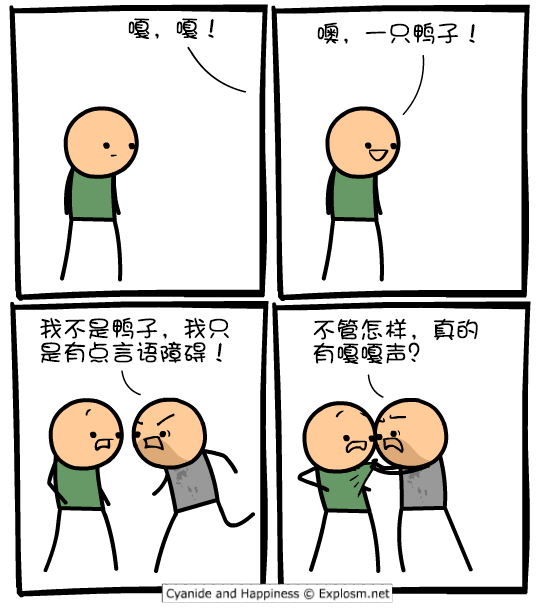
<style>
.page{position:relative;width:540px;height:610px;background:#ffffff}
.page>*{position:absolute;margin:0}
.t1{font:24px "DFPShaoNvW5";color:#000000}
.t2{font:24px/24px "DFPShaoNvW5";color:#000000}
</style>
<div class="page">
<p class="t1" style="left:128px;top:18px;width:86px;height:21px">嘎，嘎！</p>
<p class="t1" style="left:317px;top:22px;width:158px;height:23px">噢，一只鸭子！</p>
<p class="t2" style="left:40px;top:317px;width:189px;height:46px">我不是鸭子，我只<br>是有点言语障碍！</p>
<p class="t2" style="left:313px;top:318px;width:165px;height:46px">不管怎样，真的<br>有嘎嘎声？</p>
</div>
